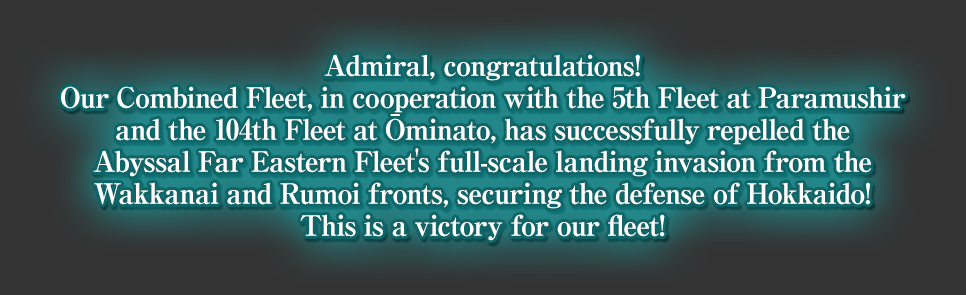
<style>
.page{position:relative;width:966px;height:295px;background:#333333}
.page>*{position:absolute;margin:0}
.t1{font:28px/32px "RyuminPro-ExBold";letter-spacing:-0.04em;color:#ffffff}
</style>
<div class="page">
<p class="t1" style="left:61px;top:54px;width:845px;height:187px;text-align:center">Admiral, congratulations!<br>Our Combined Fleet, in cooperation with the 5th Fleet at Paramushir<br>and the 104th Fleet at Ōminato, has successfully repelled the<br>Abyssal Far Eastern Fleet＇s full-scale landing invasion from the<br>Wakkanai and Rumoi fronts, securing the defense of Hokkaido!<br>This is a victory for our fleet!</p>
</div>
